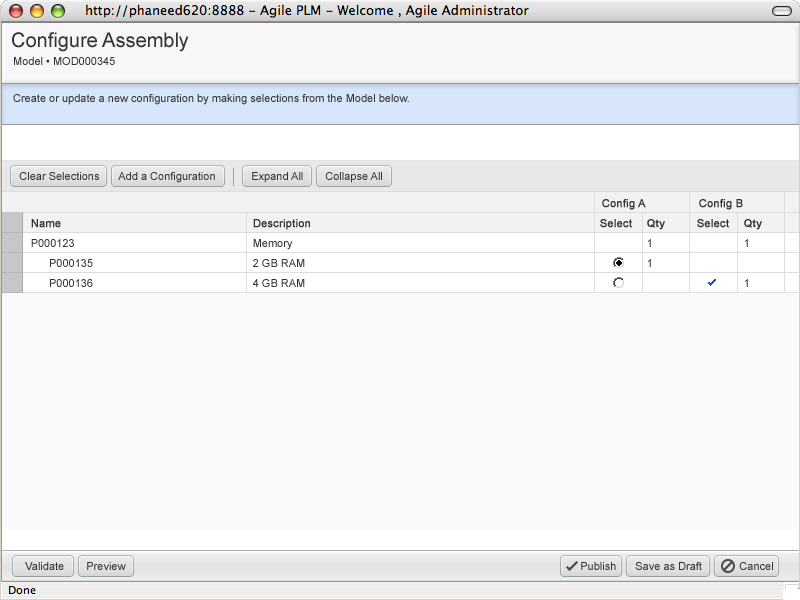
<style>
.page{position:relative;width:800px;height:600px;background:#fafafa}
.page>*{position:absolute;margin:0}
.t1{font:20px "ArialMT";color:#333333}
.t2{font:11px "ArialMT";color:#333333}
.t3{font:11px "ArialMT";color:#333333;font-weight:bold}
.t4{font:11px/20px "ArialMT";color:#333333}
.t5{font:11px/16px "Arial-BoldMT";color:#333333}
.t6{font:11px/20px "ArialMT";color:#333333;font-weight:bold}
</style>
<div class="page">
<p class="t1" style="left:12px;top:32px;width:177px;height:20px">Configure Assembly</p>
<p class="t2" style="left:14px;top:57px;width:101px;height:8px">Model • MOD000345</p>
<p class="t2" style="left:13px;top:94px;width:396px;height:11px">Create or update a new configuration by making selections from the Model below.</p>
<p class="t2" style="left:19px;top:172px;width:80px;height:8px">Clear Selections</p>
<p class="t2" style="left:118px;top:172px;width:97px;height:11px">Add a Configuration</p>
<p class="t2" style="left:252px;top:172px;width:51px;height:11px">Expand All</p>
<p class="t2" style="left:325px;top:172px;width:57px;height:11px">Collapse All</p>
<p class="t3" style="left:602px;top:199px;width:44px;height:11px">Config A</p>
<p class="t3" style="left:699px;top:199px;width:44px;height:11px">Config B</p>
<p class="t4" style="left:31px;top:219px;width:62px;height:68px"><span class="t5"><br></span><span class="t6">Name<br></span>P000123<br>      P000135  <br>      P000136</p>
<p class="t4" style="left:253px;top:219px;width:57px;height:68px"><span class="t5"><br></span><span class="t6">Description<br></span>Memory<br>2 GB RAM<br>4 GB RAM</p>
<p class="t3" style="left:600px;top:219px;width:32px;height:9px">Select</p>
<p class="t5" style="left:647px;top:219px;width:18px;height:48px">Qty<br><span class="t4">1<br>1</span></p>
<p class="t3" style="left:697px;top:219px;width:32px;height:9px">Select</p>
<p class="t4" style="left:744px;top:219px;width:18px;height:68px"><span class="t5">Qty<br></span>1<br><br>1</p>
<p class="t2" style="left:25px;top:562px;width:39px;height:8px">Validate</p>
<p class="t2" style="left:87px;top:562px;width:39px;height:8px">Preview</p>
<p class="t2" style="left:581px;top:562px;width:35px;height:8px">Publish</p>
<p class="t2" style="left:635px;top:562px;width:67px;height:8px">Save as Draft</p>
<p class="t2" style="left:739px;top:562px;width:34px;height:8px">Cancel</p>
</div>
